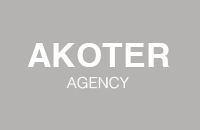
<style>
.page{position:relative;width:200px;height:130px;background:#b4b3b1}
.page>*{position:absolute;margin:0}
.t1{font:33.5px "Helvetica-Bold";letter-spacing:0.005em;color:#ffffff;text-transform:uppercase}
.t2{font:14.9px "Helvetica-Light";letter-spacing:0.005em;color:#ffffff;text-transform:uppercase}
</style>
<div class="page">
<p class="t1" style="left:27px;top:43px;width:142px;height:24px">AKOTER</p>
<p class="t2" style="left:66px;top:76px;width:63px;height:13px">AGENCY</p>
</div>
